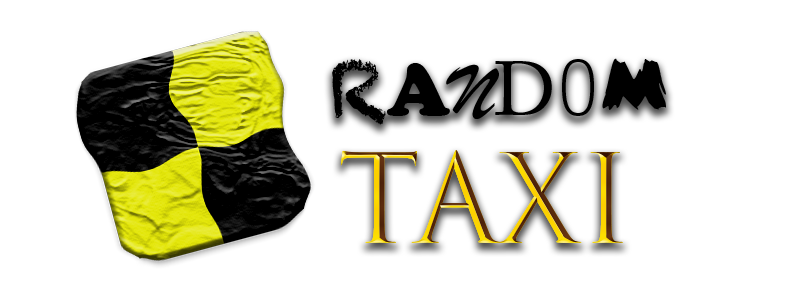
<style>
.page{position:relative;width:800px;height:300px;background:#ffffff}
.page>*{position:absolute;margin:0}
.t1{font:76px "Chalkduster";color:#000000}
.t2{font:76px "CooperBlack";color:#000000}
.t3{font:76px "BrushScriptMT";color:#000000}
.t4{font:76px "ACaslonPro-Regular";color:#000000}
.t5{font:76px "LetterGothicStd";color:#000000}
.t6{font:76px "DSZombieCyr";color:#000000}
.t7{font:120px "TrajanColor-Concept"}
</style>
<div class="page">
<p class="t1" style="left:332px;top:58px;width:334px;height:67px">R<span class="t2">A</span><span class="t3">N</span><span class="t4">D</span><span class="t5">O</span><span class="t6">M</span></p>
<p class="t7" style="left:341px;top:150px;width:282px;height:93px">TAXI</p>
</div>
